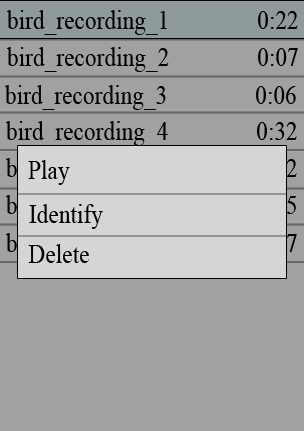
<style>
.page{position:relative;width:304px;height:431px;background:#a1a1a1}
.page>*{position:absolute;margin:0}
.t1{font:26.8px "IskoolaPota";color:#010101;scale:0.87 1}
.t2{font:26.8px "IskoolaPota";color:#000000;scale:0.87 1}
</style>
<div class="page">
<p class="t1" style="left:7px;top:10px;width:291px;height:25px">bird_recording_1             0:22</p>
<p class="t2" style="left:7px;top:47px;width:291px;height:25px">bird_recording_2             0:07</p>
<p class="t2" style="left:5px;top:85px;width:291px;height:25px">bird_recording_3             0:06</p>
<p class="t2" style="left:6px;top:121px;width:291px;height:25px">bird_recording_4             0:32</p>
<p class="t2" style="left:28px;top:160px;width:42px;height:25px">Play</p>
<p class="t2" style="left:29px;top:204px;width:74px;height:25px">Identify</p>
<p class="t2" style="left:28px;top:244px;width:61px;height:19px">Delete</p>
</div>
